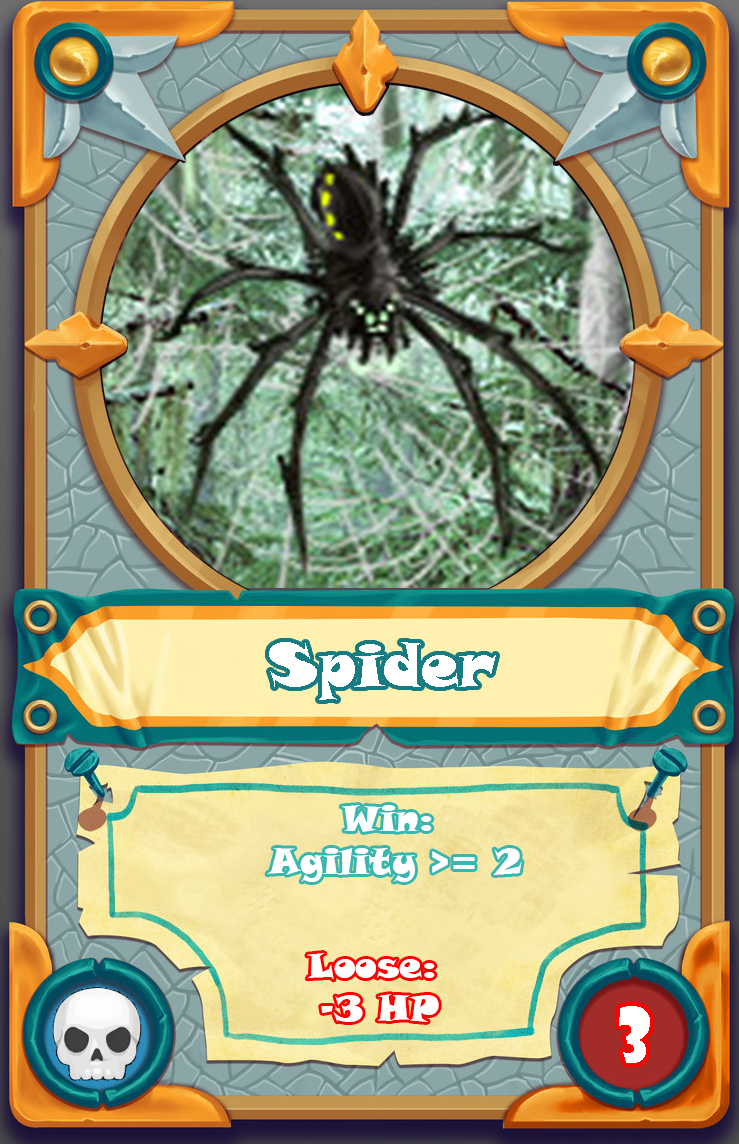
<style>
.page{position:relative;width:739px;height:1144px}
.page>*{position:absolute;margin:0}
.t1{font:60px "SnapITC-Regular";color:#ffffff}
.t2{font:36px "SnapITC-Regular";color:#ffffff}
.t3{font:72px "ShowcardGothic-Reg";color:#ffffff}
</style>
<div class="page">
<p class="t1" style="left:269px;top:642px;width:227px;height:58px">Spider</p>
<p class="t2" style="left:267px;top:805px;width:255px;height:77px;text-align:center">Win: <br>Agility &gt;= 2</p>
<p class="t2" style="left:307px;top:953px;width:132px;height:69px;text-align:center">Loose: <br>-3 HP</p>
<p class="t3" style="left:619px;top:1006px;width:31px;height:57px">3</p>
</div>
